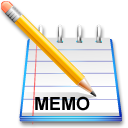
<style>
.page{position:relative;width:128px;height:128px;background:#ffffff}
.page>*{position:absolute;margin:0}
.t1{font:18px "Arial-BoldMT";color:#010101}
</style>
<div class="page">
<p class="t1" style="left:35px;top:96px;width:55px;height:15px">MEMO</p>
</div>
